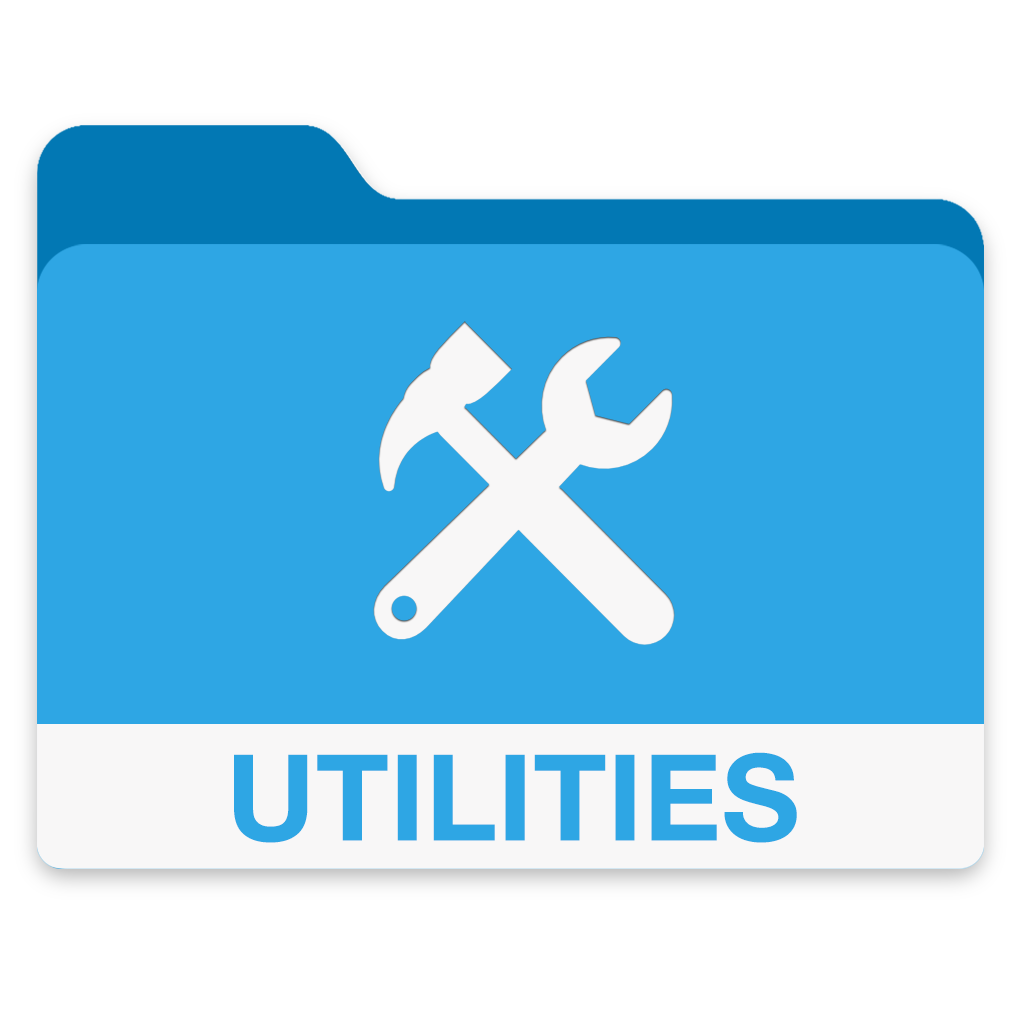
<style>
.page{position:relative;width:1024px;height:1024px;background:#2ea6e4}
.page>*{position:absolute;margin:0}
.t1{font:120px "HelveticaNeue-Bold";letter-spacing:0.005em;color:#2ea6e4}
</style>
<div class="page">
<p class="t1" style="left:234px;top:752px;width:563px;height:91px">UTILITIES</p>
</div>
